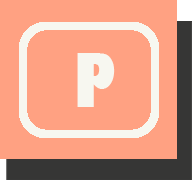
<style>
.page{position:relative;width:192px;height:180px;background:#ffa182}
.page>*{position:absolute;margin:0}
.t1{font:72px "GillSans-UltraBoldCondensed";color:#f7f7f0}
</style>
<div class="page">
<p class="t1" style="left:77px;top:53px;width:38px;height:54px">P</p>
</div>
